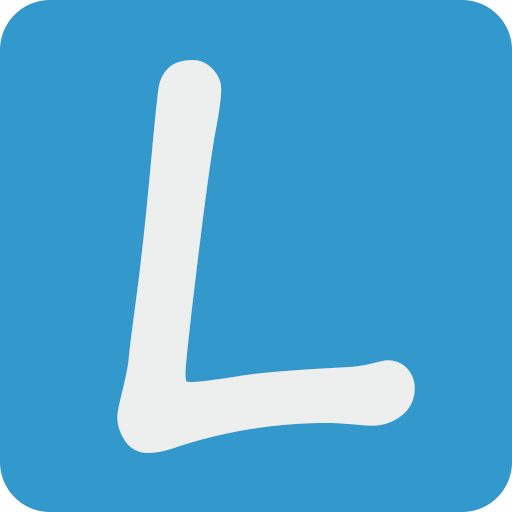
<style>
.page{position:relative;width:512px;height:512px;background:#3399cc}
.page>*{position:absolute;margin:0}
.t1{font:512px "SegoePrint";color:#edeeee;font-weight:bold}
</style>
<div class="page">
<p class="t1" style="left:117px;top:60px;width:298px;height:393px">L</p>
</div>
